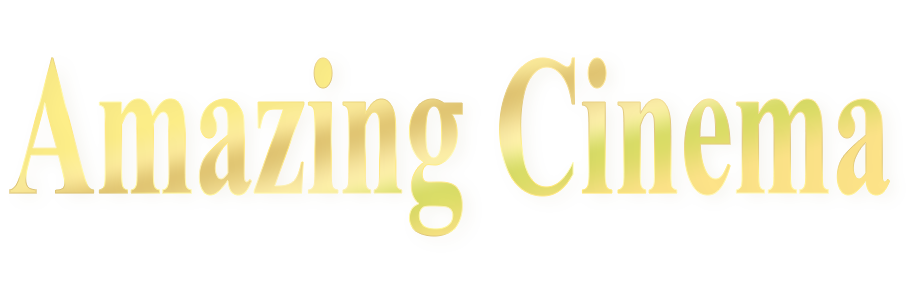
<style>
.page{position:relative;width:908px;height:290px;background:#ffffff}
.page>*{position:absolute;margin:0}
.t1{font:199.4px "TimesNewRomanPS-BoldMT";scale:0.6 1}
</style>
<div class="page">
<p class="t1" style="left:9px;top:57px;width:881px;height:179px">Amazing Cinema</p>
</div>
